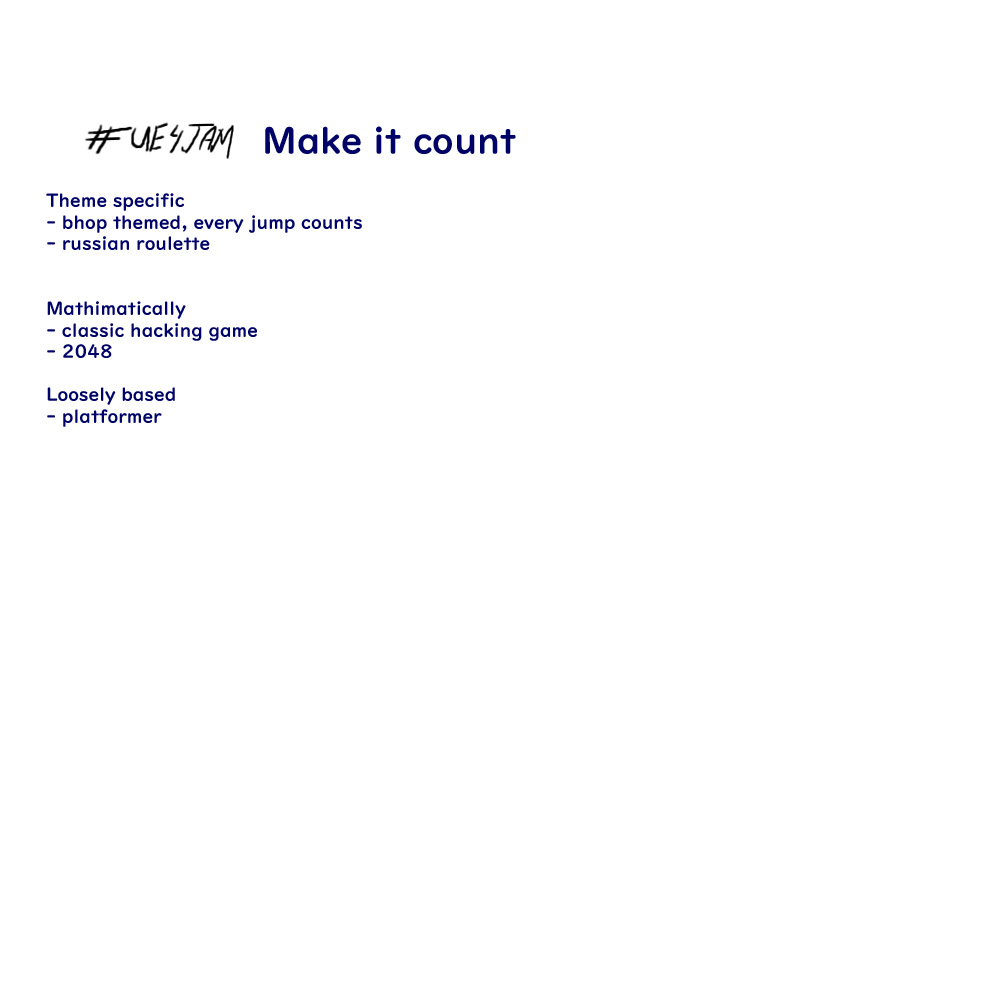
<style>
.page{position:relative;width:1000px;height:1000px;background:#ffffff}
.page>*{position:absolute;margin:0}
.t1{font:36px "UDDigiKyokashoNP-B";color:#000366}
.t2{font:18px "UDDigiKyokashoNP-B";color:#000366}
</style>
<div class="page">
<p class="t1" style="left:265px;top:126px;width:251px;height:28px">Make it count</p>
<p class="t2" style="left:46px;top:193px;width:316px;height:234px">Theme specific<br>- bhop themed, every jump counts<br>- russian roulette<br><br><br>Mathimatically<br>- classic hacking game<br>- 2048<br><br>Loosely based<br>- platformer</p>
</div>
